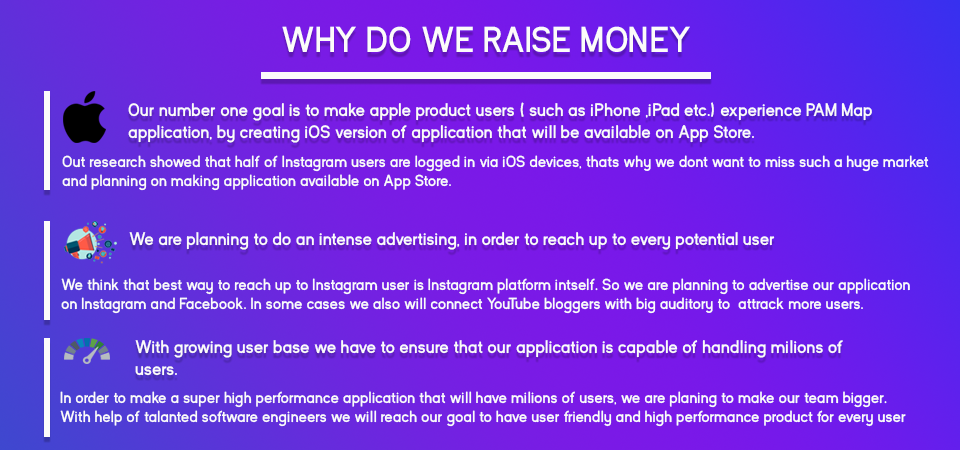
<style>
.page{position:relative;width:960px;height:450px}
.page>*{position:absolute;margin:0}
.t1{font:36px "KayakSans-Bold";color:#fcfbfa}
.t2{font:18px "KayakSans-Bold";color:#fcfbfa}
.t3{font:16px "KayakSans-Bold";color:#fcfbfa}
</style>
<div class="page">
<p class="t1" style="left:282px;top:26px;width:408px;height:26px">WHY DO WE RAISE MONEY</p>
<p class="t2" style="left:128px;top:102px;width:744px;height:41px">Our number one goal is to make apple product users ( such as iPhone ,iPad etc.) experience PAM Map<br>application, by creating iOS version of application that will be available on App Store.</p>
<p class="t3" style="left:62px;top:155px;width:867px;height:36px">Out research showed that half of Instagram users are logged in via iOS devices, thats why we dont want to miss such a huge market <br>and planning on making application available on App Store.</p>
<p class="t2" style="left:129px;top:232px;width:646px;height:18px">We are planning to do an intense advertising, in order to reach up to every potential user</p>
<p class="t3" style="left:61px;top:278px;width:849px;height:36px">We think that best way to reach up to Instagram user is Instagram platform intself. So we are planning to advertise our application<br>on Instagram and Facebook. In some cases we also will connect YouTube bloggers with big auditory to  attrack more users.</p>
<p class="t2" style="left:135px;top:340px;width:708px;height:36px">With growing user base we have to ensure that our application is capable of handling milions of <br>users.</p>
<p class="t3" style="left:60px;top:391px;width:846px;height:36px">In order to make a super high performance application that will have milions of users, we are planing to make our team bigger.<br>With help of talanted software engineers we will reach our goal to have user friendly and high performance product for every user</p>
</div>
